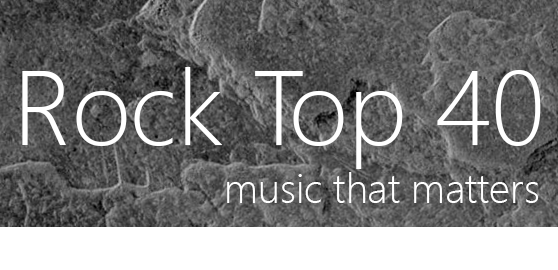
<style>
.page{position:relative;width:558px;height:270px}
.page>*{position:absolute;margin:0}
.t1{font:104.7px "SegoeUI-Light";color:#ffffff}
.t2{font:41px "SegoeUI-Light";color:#ffffff}
</style>
<div class="page">
<p class="t1" style="left:22px;top:67px;width:519px;height:102px">Rock Top 40</p>
<p class="t2" style="left:227px;top:172px;width:312px;height:31px">music that matters</p>
</div>
